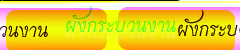
<style>
.page{position:relative;width:240px;height:50px}
.page>*{position:absolute;margin:0}
.t1{font:28px "THCharmonman"}
</style>
<div class="page">
<p class="t1" style="left:66px;top:5px;width:110px;height:27px">ผังกระบวนงาน</p>
</div>
